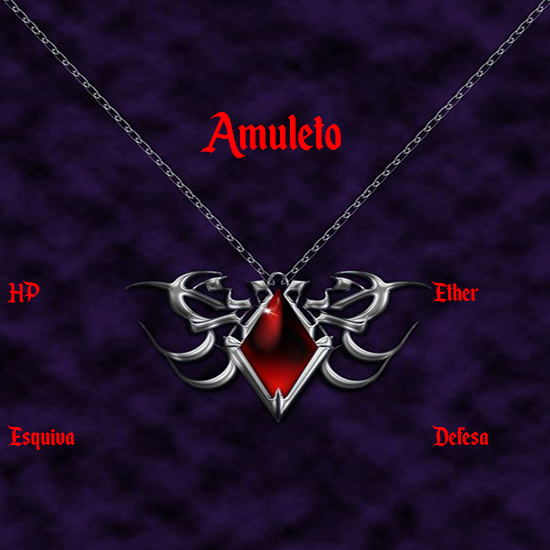
<style>
.page{position:relative;width:550px;height:550px}
.page>*{position:absolute;margin:0}
.t1{font:60px "EnchantedLand";color:#ff0000}
.t2{font:30px "EnchantedLand";color:#ff0000}
</style>
<div class="page">
<p class="t1" style="left:200px;top:112px;width:141px;height:46px">Amuleto</p>
<p class="t2" style="left:7px;top:280px;width:482px;height:171px">HP           Ether<br><br><br><br>   Esquiva          Defesa</p>
</div>
